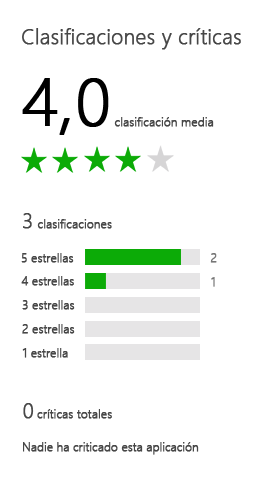
<style>
.page{position:relative;width:273px;height:478px;background:#ffffff}
.page>*{position:absolute;margin:0}
.t1{font:21.1px "SegoeUI-Light";color:#474747;font-weight:bold}
.t2{font:66.7px "SegoeUI-Light";color:#000000;font-weight:bold}
.t3{font:12px "SegoeUI-Light";color:#474747;font-weight:bold}
.t4{font:21.3px "SegoeUI-Light";color:#474747;font-weight:bold}
.t5{font:11.9px "SegoeUI-Light";color:#767676;font-weight:bold}
.t6{font:11.9px "SegoeUI-Light";color:#474747;font-weight:bold}
</style>
<div class="page">
<p class="t1" style="left:22px;top:28px;width:219px;height:22px">Clasificaciones y críticas</p>
<p class="t2" style="left:22px;top:78px;width:87px;height:57px">4,0</p>
<p class="t3" style="left:114px;top:117px;width:100px;height:10px">clasificación media</p>
<p class="t4" style="left:23px;top:213px;width:9px;height:16px">3</p>
<p class="t3" style="left:37px;top:219px;width:75px;height:10px">clasificaciones</p>
<p class="t3" style="left:21px;top:253px;width:53px;height:10px">5 estrellas</p>
<p class="t5" style="left:210px;top:253px;width:7px;height:10px">2</p>
<p class="t3" style="left:21px;top:276px;width:53px;height:10px">4 estrellas</p>
<p class="t5" style="left:211px;top:277px;width:4px;height:10px">1</p>
<p class="t3" style="left:22px;top:300px;width:53px;height:10px">3 estrellas</p>
<p class="t3" style="left:22px;top:324px;width:53px;height:10px">2 estrellas</p>
<p class="t3" style="left:22px;top:348px;width:46px;height:10px">1 estrella</p>
<p class="t4" style="left:23px;top:403px;width:11px;height:16px">0</p>
<p class="t3" style="left:37px;top:409px;width:75px;height:10px">críticas totales</p>
<p class="t6" style="left:23px;top:442px;width:176px;height:13px">Nadie ha criticado esta aplicación</p>
</div>
